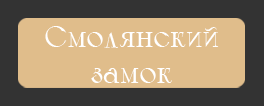
<style>
.page{position:relative;width:264px;height:106px;background:#e0bd8b}
.page>*{position:absolute;margin:0}
.t1{font:30px "Calypso-Regular";color:#ffffff}
</style>
<div class="page">
<p class="t1" style="left:45px;top:26px;width:174px;height:57px;text-align:center">Смолянский<br>замок</p>
</div>
